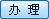
<style>
.page{position:relative;width:49px;height:19px}
.page>*{position:absolute;margin:0}
.t1{font:12px "SimSun";letter-spacing:0.05em;color:#071f23}
</style>
<div class="page">
<p class="t1" style="left:9px;top:4px;width:30px;height:11px">办 理</p>
</div>
